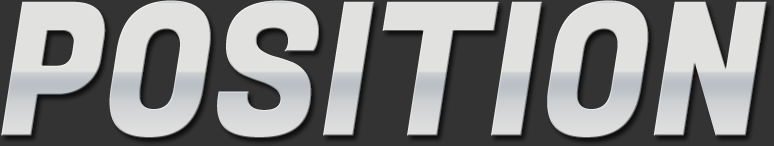
<style>
.page{position:relative;width:774px;height:146px;background:#333333}
.page>*{position:absolute;margin:0}
.t1{font:185.2px "FugazOne-Regular";color:#dfdfdf;scale:0.89 1}
</style>
<div class="page">
<p class="t1" style="left:1px;top:0px;width:766px;height:138px">POSITION</p>
</div>
